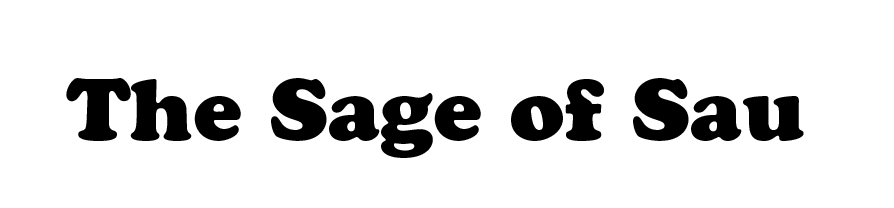
<style>
.page{position:relative;width:894px;height:208px;background:#ffffff}
.page>*{position:absolute;margin:0}
.t1{font:87.3px "CooperBlackStd";color:#000000}
</style>
<div class="page">
<p class="t1" style="left:66px;top:78px;width:738px;height:80px">The Sage of Sau</p>
</div>
